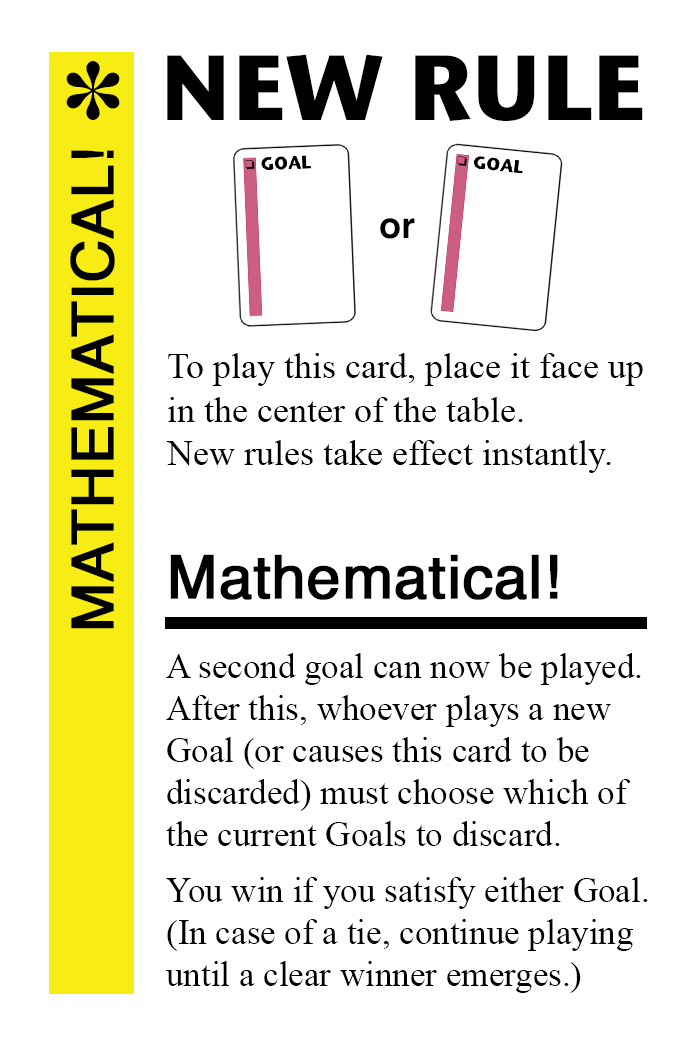
<style>
.page{position:relative;width:700px;height:1042px;background:#ffffff}
.page>*{position:absolute;margin:0}
.t1{font:92px "StoneSansITC-Bold";color:#000000}
.t2{font:82px "MS-Gothic";color:#000000}
.t3{font:58px "Helvetica";color:#000000;font-weight:bold}
.t4{font:36px "Helvetica-Bold";color:#000000}
.t5{font:36px "TimesNewRomanPSMT";color:#000000}
.t6{font:60px "Helvetica";color:#000000;font-weight:bold}
.t7{font:35px "TimesNewRomanPSMT";color:#000000}
</style>
<div class="page">
<p class="t1" style="left:167px;top:54px;width:476px;height:67px">NEW RULE</p>
<p class="t2" style="left:66px;top:61px;width:54px;height:59px">✽</p>
<p class="t3" style="left:70px;top:150px;width:45px;height:479px;rotate:-90deg">MATHEMATICAL!</p>
<p class="t4" style="left:380px;top:218px;width:35px;height:21px">or</p>
<p class="t5" style="left:166px;top:353px;width:477px;height:120px">To play this card, place it face up<br>in the center of the table. <br>New rules take effect instantly.</p>
<p class="t6" style="left:170px;top:554px;width:388px;height:46px">Mathematical!</p>
<p class="t7" style="left:166px;top:653px;width:475px;height:193px">A second goal can now be played.<br>After this, whoever plays a new<br>Goal (or causes this card to be<br>discarded) must choose which of<br>the current Goals to discard.</p>
<p class="t7" style="left:166px;top:877px;width:482px;height:116px">You win if you satisfy either Goal.<br>(In case of a tie, continue playing<br>until a clear winner emerges.)</p>
</div>
